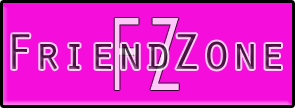
<style>
.page{position:relative;width:295px;height:108px;background:#f50ddb}
.page>*{position:absolute;margin:0}
.t1{font:108px "OratorStd";letter-spacing:-0.025em;color:#fdc7f7;scale:0.67 1}
.t2{font:48px "OratorStd";letter-spacing:-0.025em}
.t3{font:52px "OratorStd";letter-spacing:-0.025em}
</style>
<div class="page">
<p class="t1" style="left:114px;top:18px;width:65px;height:72px">FZ</p>
<p class="t2" style="left:12px;top:34px;width:269px;height:36px"><span class="t3">F</span>riend<span class="t3">Zo</span>ne</p>
</div>
